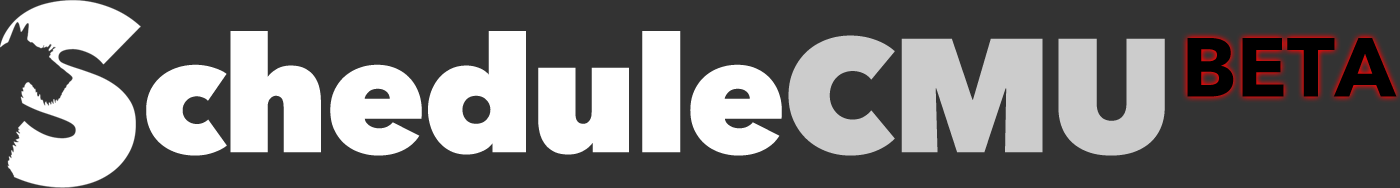
<style>
.page{position:relative;width:1400px;height:188px;background:#333333}
.page>*{position:absolute;margin:0}
.t1{font:160.1px "AvenirNext-Heavy";letter-spacing:-0.02em;color:#ffffff}
.t2{font:160.1px "AvenirNext-Heavy";letter-spacing:-0.02em;color:#cccccc}
.t3{font:82.9px "AvenirNext-Bold";color:#000000}
</style>
<div class="page">
<p class="t1" style="left:146px;top:31px;width:1019px;height:125px">chedule<span class="t2">CMU</span></p>
<p class="t3" style="left:1187px;top:38px;width:210px;height:59px">BETA</p>
</div>
